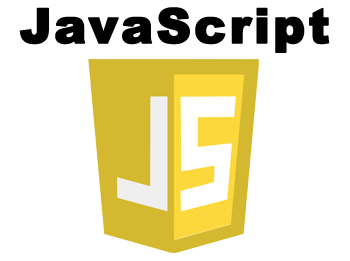
<style>
.page{position:relative;width:350px;height:261px;background:#ffffff}
.page>*{position:absolute;margin:0}
.t1{font:48px "Arial-Black";letter-spacing:0.04em;color:#000000;font-weight:bold}
</style>
<div class="page">
<p class="t1" style="left:19px;top:7px;width:311px;height:46px">JavaScript</p>
</div>
